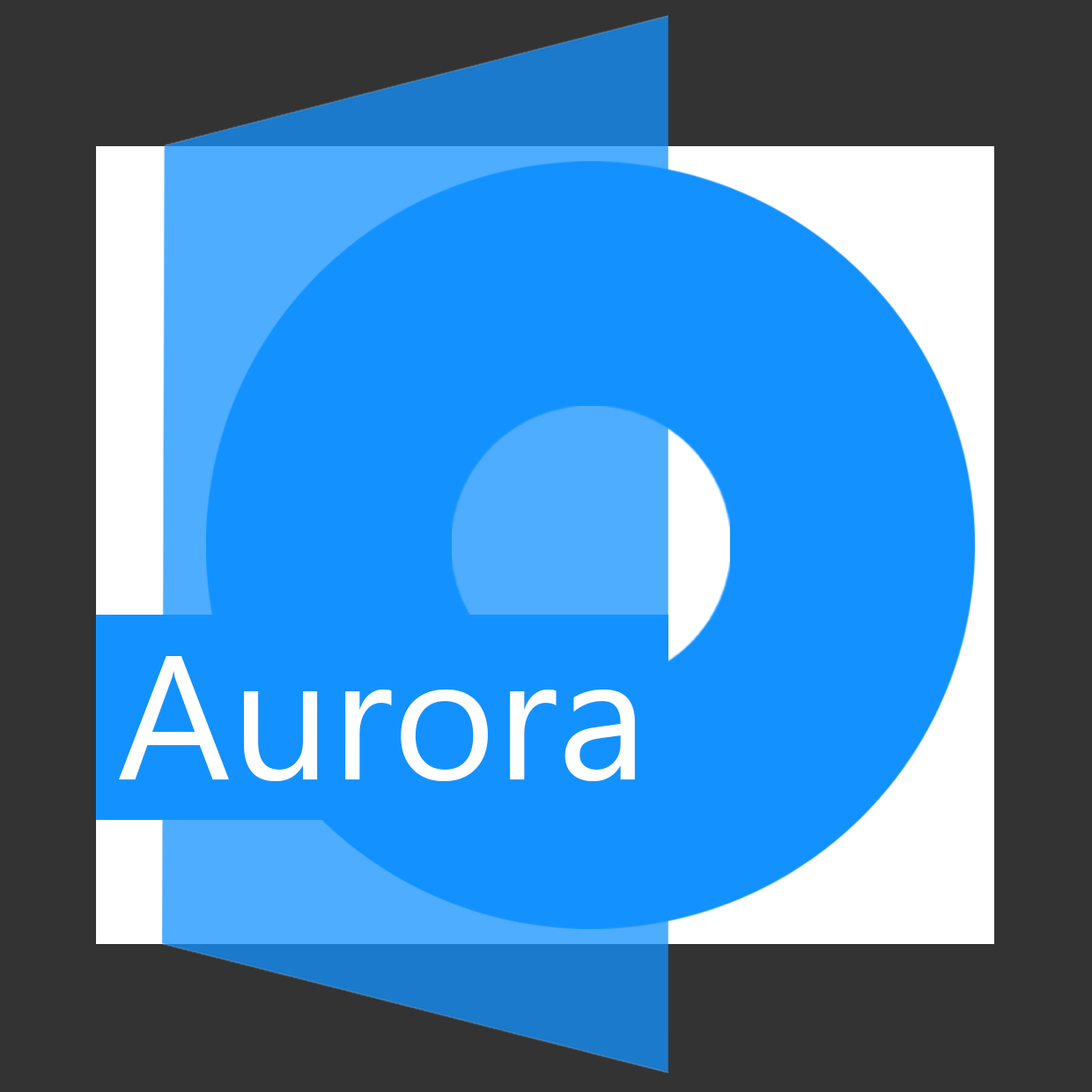
<style>
.page{position:relative;width:1092px;height:1092px;background:#333333}
.page>*{position:absolute;margin:0}
.t1{font:176.5px "SegoeUI";color:#ffffff}
</style>
<div class="page">
<p class="t1" style="left:119px;top:656px;width:516px;height:125px">Aurora</p>
</div>
